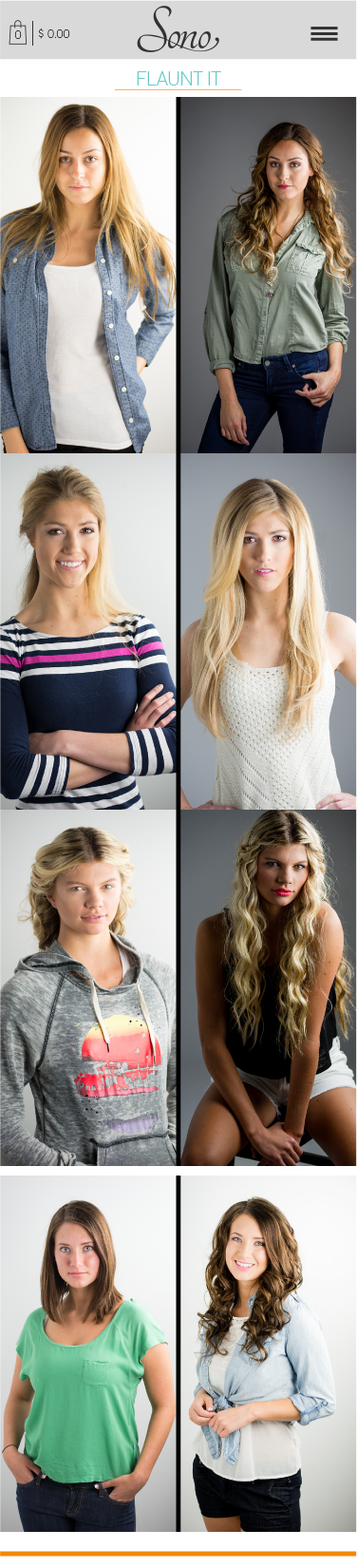
<style>
.page{position:relative;width:357px;height:1568px}
.page>*{position:absolute;margin:0}
.t1{font:11.8px "DistrictPro-Thin";color:#323232}
.t2{font:20px "DistrictPro-Thin";color:#65cbc9}
</style>
<div class="page">
<p class="t1" style="left:38px;top:28px;width:32px;height:11px">$ 0.00</p>
<p class="t1" style="left:14px;top:30px;width:8px;height:9px">0</p>
<p class="t2" style="left:137px;top:71px;width:84px;height:15px">FLAUNT IT</p>
</div>
